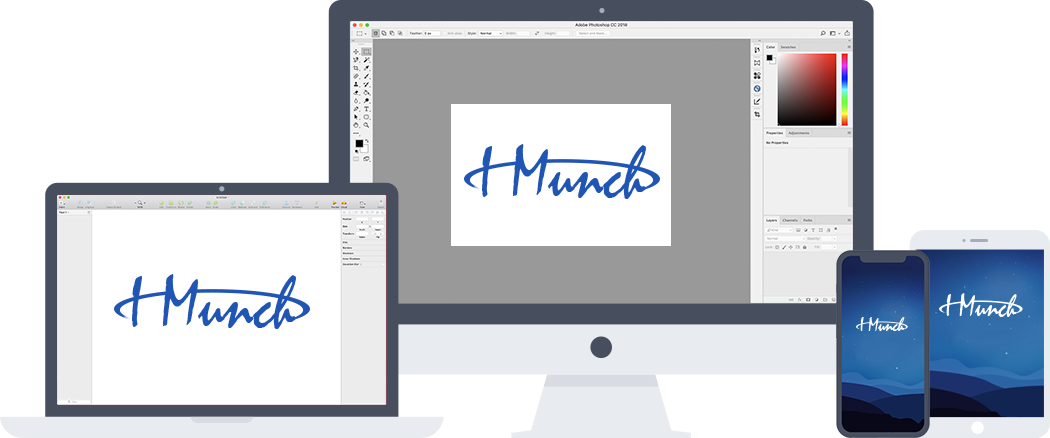
<style>
.page{position:relative;width:1050px;height:438px;background:#ffffff}
.page>*{position:absolute;margin:0}
.t1{font:75px "Mistral";color:#2155b4;scale:0.85 1}
.t2{font:32px "Mistral";color:#ffffff;scale:0.85 1}
.t3{font:19.8px "Mistral";color:#ffffff;scale:0.85 1}
</style>
<div class="page">
<p class="t1" style="left:482px;top:144px;width:164px;height:55px">I Munch</p>
<p class="t1" style="left:132px;top:274px;width:164px;height:55px">I Munch</p>
<p class="t2" style="left:946px;top:293px;width:71px;height:24px">I Munch</p>
<p class="t3" style="left:860px;top:317px;width:45px;height:14px">I Munch</p>
</div>
